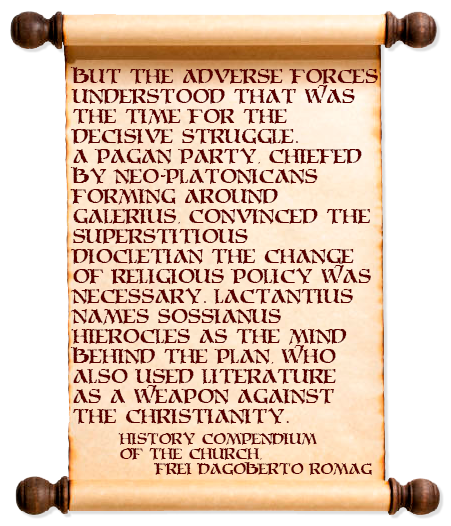
<style>
.page{position:relative;width:451px;height:526px;background:#ffffff}
.page>*{position:absolute;margin:0}
.t1{font:16.7px "MoriaCitadel";color:#580000}
.t2{font:12.5px "MoriaCitadel";color:#580000}
</style>
<div class="page">
<p class="t1" style="left:70px;top:67px;width:308px;height:357px">But the adverse forces<br>understood that was<br>the time for the<br>decisive struggle.<br>A pagan party, chiefed<br>by neo-platonicans<br>forming around<br>Galerius, convinced the<br>superstitious<br>Diocletian the change<br>of religious policy was<br>necessary. Lactantius<br>names Sossianus<br>Hierocles as the mind<br>behind the plan, who<br>also used literature<br>as a weapon against<br>the christianity.</p>
<p class="t2" style="left:118px;top:432px;width:254px;height:43px">History Compendium<br>of the Church,<br> Frei Dagoberto Romag</p>
</div>
